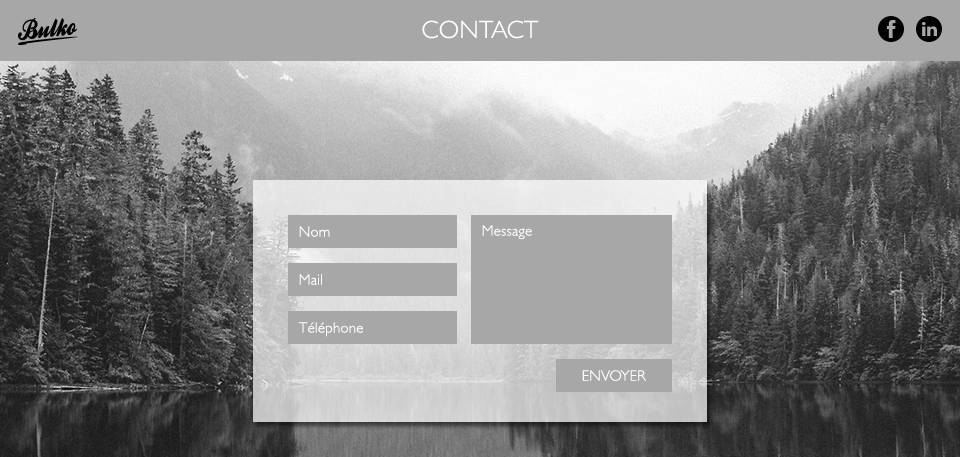
<style>
.page{position:relative;width:960px;height:457px;background:#a7a7a7}
.page>*{position:absolute;margin:0}
.t1{font:25px "GillSans-Light";letter-spacing:0.01em;color:#ffffff;text-transform:uppercase}
.t2{font:15px "GillSans-Light";letter-spacing:0.01em;color:#ffffff}
.t3{font:15px "GillSans-Light";letter-spacing:0.01em;color:#ffffff;text-transform:uppercase}
</style>
<div class="page">
<p class="t1" style="left:422px;top:20px;width:117px;height:19px">Contact</p>
<p class="t2" style="left:299px;top:226px;width:31px;height:11px">Nom</p>
<p class="t2" style="left:482px;top:225px;width:50px;height:15px">Message</p>
<p class="t2" style="left:299px;top:274px;width:23px;height:11px">Mail</p>
<p class="t2" style="left:298px;top:322px;width:65px;height:15px">Téléphone</p>
<p class="t3" style="left:582px;top:370px;width:64px;height:11px">Envoyer</p>
</div>
